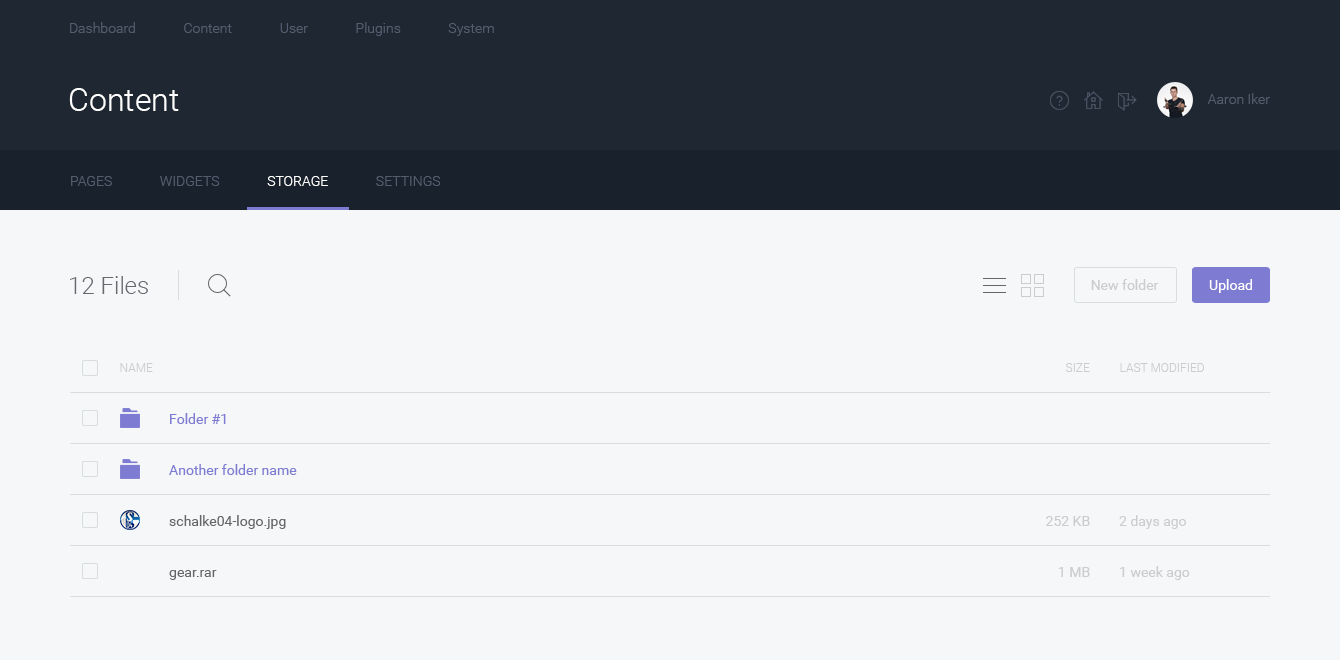
<style>
.page{position:relative;width:1340px;height:660px;background:#f5f7f9}
.page>*{position:absolute;margin:0}
.t1{font:14px "Roboto-Light";color:#555c6d}
.t2{font:32px "Roboto-Light";color:#ffffff}
.t3{font:14px "Roboto-Light";color:#ffffff}
.t4{font:24px "Roboto-Light";color:#666a6f}
.t5{font:14px "Roboto-Regular";color:#cccccc}
.t6{font:14px "Roboto-Regular";color:#ffffff}
.t7{font:12px "Roboto-Light";color:#cccccc}
.t8{font:14px "Roboto-Regular";color:#7e7bd2}
.t9{font:14px "Roboto-Regular";color:#666666}
</style>
<div class="page">
<p class="t1" style="left:70px;top:22px;width:424px;height:14px">Dashboard              Content              User              Plugins              System</p>
<p class="t2" style="left:69px;top:88px;width:110px;height:23px">Content</p>
<p class="t1" style="left:1207px;top:93px;width:63px;height:11px">Aaron Iker</p>
<p class="t1" style="left:71px;top:176px;width:370px;height:10px">PAGES              WIDGETS              <span class="t3">STORAGE</span>              SETTINGS</p>
<p class="t4" style="left:70px;top:276px;width:78px;height:18px">12 Files</p>
<p class="t5" style="left:1091px;top:279px;width:68px;height:11px">New folder</p>
<p class="t6" style="left:1209px;top:279px;width:43px;height:14px">Upload</p>
<p class="t7" style="left:120px;top:363px;width:33px;height:9px">NAME</p>
<p class="t7" style="left:1065px;top:363px;width:25px;height:9px">SIZE</p>
<p class="t7" style="left:1120px;top:363px;width:84px;height:9px">LAST MODIFIED</p>
<p class="t8" style="left:170px;top:413px;width:56px;height:11px">Folder #1</p>
<p class="t8" style="left:169px;top:464px;width:128px;height:11px">Another folder name</p>
<p class="t9" style="left:169px;top:515px;width:117px;height:14px">schalke04-logo.jpg</p>
<p class="t5" style="left:1046px;top:516px;width:44px;height:10px">252 KB</p>
<p class="t5" style="left:1119px;top:515px;width:67px;height:14px">2 days ago</p>
<p class="t5" style="left:1058px;top:567px;width:32px;height:10px">1 MB</p>
<p class="t5" style="left:1120px;top:566px;width:70px;height:14px">1 week ago</p>
<p class="t9" style="left:169px;top:570px;width:48px;height:10px">gear.rar</p>
</div>
